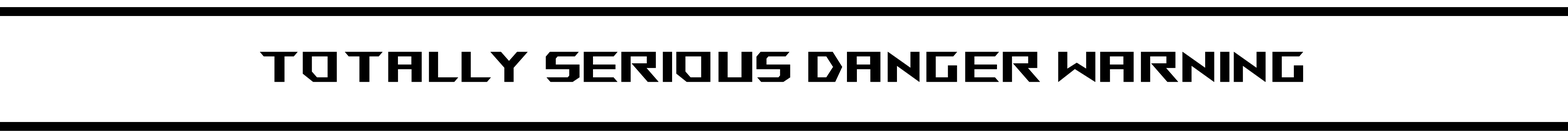
<style>
.page{position:relative;width:1568px;height:138px;background:#ffffff}
.page>*{position:absolute;margin:0}
.t1{font:42.6px "AniMeMatrix-MB_EN";color:#000000;font-weight:bold}
</style>
<div class="page">
<p class="t1" style="left:260px;top:51px;width:1043px;height:31px">totally serious danger warning</p>
</div>
